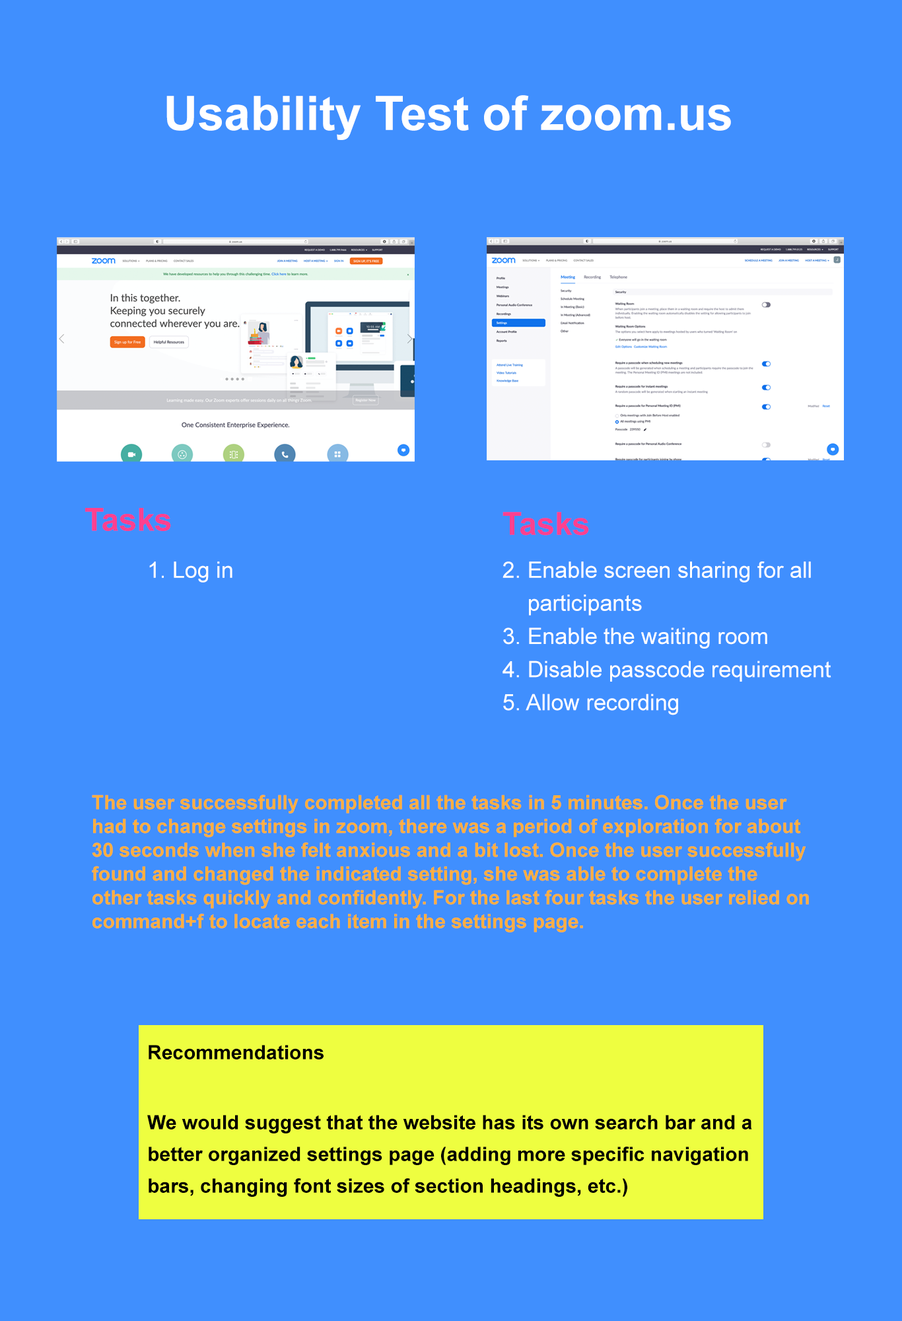
<style>
.page{position:relative;width:902px;height:1321px;background:#408ffe}
.page>*{position:absolute;margin:0}
.t1{font:47.6px "Arial-BoldMT";color:#ffffff}
.t2{font:31.7px "Arial-BoldMT";color:#fe408f}
.t3{font:22.5px "ArialMT";color:#ffffff}
.t4{font:22.5px/30px "ArialMT";color:#ffffff}
.t5{font:19.8px/23.8px "Arial-BoldMT";color:#feaf40}
.t6{font:19.8px/31.7px "Arial-BoldMT";color:#000000}
</style>
<div class="page">
<p class="t1" style="left:166px;top:95px;width:565px;height:45px">Usability Test of zoom.us</p>
<p class="t2" style="left:85px;top:508px;width:86px;height:23px">Tasks</p>
<p class="t2" style="left:503px;top:512px;width:86px;height:24px">Tasks</p>
<p class="t3" style="left:149px;top:562px;width:84px;height:21px">1. Log in</p>
<p class="t4" style="left:503px;top:562px;width:329px;height:153px">2. Enable screen sharing for all <br>    participants<br>3. Enable the waiting room<br>4. Disable passcode requirement<br>5. Allow recording</p>
<p class="t5" style="left:92px;top:795px;width:717px;height:138px">The user successfully completed all the tasks in 5 minutes. Once the user had to change settings in zoom, there was a period of exploration for about 30 seconds when she felt anxious and a bit lost. Once the user successfully found and changed the indicated setting, she was able to complete the other tasks quickly and confidently. For the last four tasks the user relied on command+f to locate each item in the settings page.</p>
<p class="t6" style="left:147px;top:1045px;width:605px;height:152px">Recommendations<br><br>We would suggest that the website has its own search bar and a better organized settings page (adding more specific navigation bars, changing font sizes of section headings, etc.)</p>
</div>
